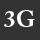
<style>
.page{position:relative;width:40px;height:40px;background:#333333}
.page>*{position:absolute;margin:0}
.t1{font:24px "ACaslonPro-Bold";color:#ffffff}
</style>
<div class="page">
<p class="t1" style="left:4px;top:10px;width:31px;height:17px">3G</p>
</div>
